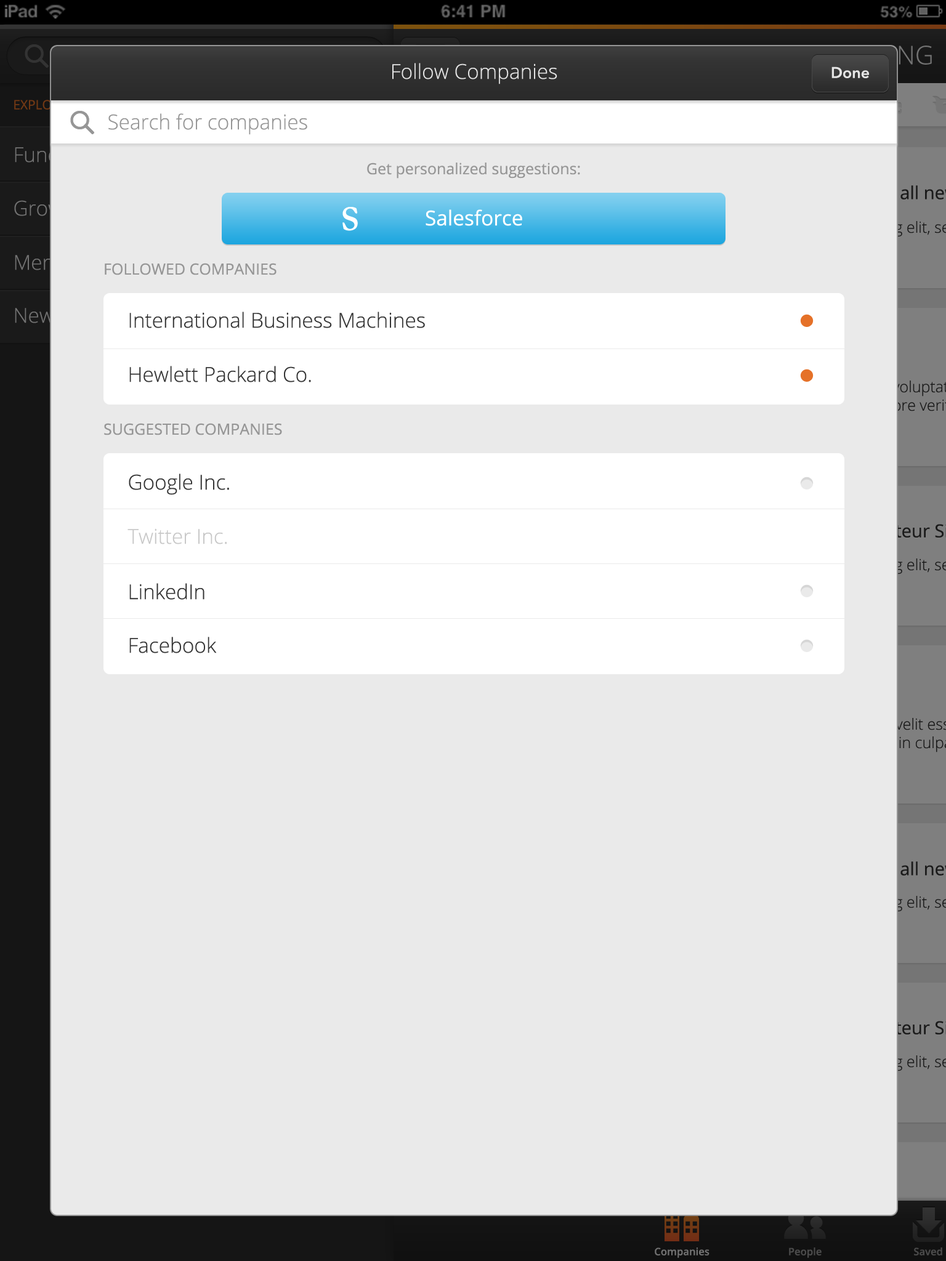
<style>
.page{position:relative;width:946px;height:1261px;background:#eaeaea}
.page>*{position:absolute;margin:0}
.t1{font:20.5px "OpenSans-Light";color:#e5e5e5}
.t2{font:15.4px "AvenirNext-DemiBold";color:#e5e5e5}
.t3{font:20.5px "OpenSans-Light";color:#969696}
.t4{font:15.4px "OpenSans";color:#969696}
.t5{font:20.5px "OpenSans";color:#ffffff}
.t6{font:20.5px "OpenSans-Light";color:#343434}
.t7{font:20.5px "OpenSans-Light";color:#c8c8c8}
</style>
<div class="page">
<p class="t1" style="left:392px;top:63px;width:165px;height:21px">Follow Companies</p>
<p class="t2" style="left:831px;top:66px;width:38px;height:12px">Done</p>
<p class="t3" style="left:108px;top:113px;width:199px;height:22px">Search for companies</p>
<p class="t4" style="left:367px;top:163px;width:213px;height:16px">Get personalized suggestions:</p>
<p class="t5" style="left:425px;top:209px;width:97px;height:17px">Salesforce</p>
<p class="t4" style="left:105px;top:263px;width:171px;height:12px">FOLLOWED COMPANIES</p>
<p class="t6" style="left:129px;top:312px;width:296px;height:16px">International Business Machines</p>
<p class="t6" style="left:129px;top:366px;width:182px;height:16px">Hewlett Packard Co.</p>
<p class="t4" style="left:104px;top:423px;width:178px;height:12px">SUGGESTED COMPANIES</p>
<p class="t6" style="left:129px;top:473px;width:100px;height:22px">Google Inc.</p>
<p class="t7" style="left:127px;top:528px;width:100px;height:16px">Twitter Inc.</p>
<p class="t6" style="left:129px;top:583px;width:75px;height:17px">LinkedIn</p>
<p class="t6" style="left:129px;top:637px;width:88px;height:16px">Facebook</p>
</div>
